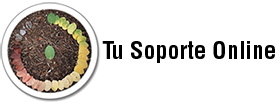
<style>
.page{position:relative;width:280px;height:102px;background:#ffffff}
.page>*{position:absolute;margin:0}
.t1{font:24px "Helvetica-Condensed-Bold";color:#000000}
</style>
<div class="page">
<p class="t1" style="left:102px;top:41px;width:173px;height:22px">Tu Soporte Online</p>
</div>
